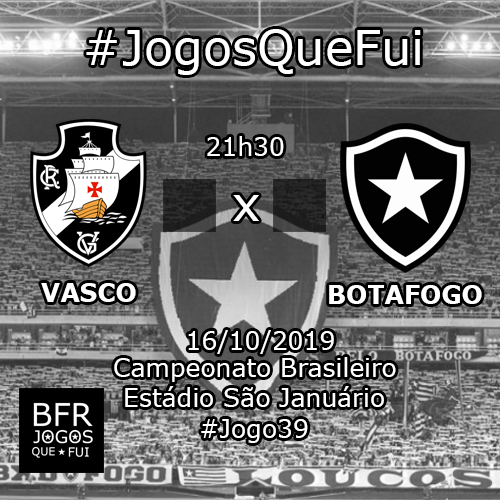
<style>
.page{position:relative;width:500px;height:500px}
.page>*{position:absolute;margin:0}
.t1{font:48px "Verdana";color:#ffffff}
.t2{font:25px "Verdana";color:#ffffff}
.t3{font:25px "Verdana-Bold";color:#ffffff}
</style>
<div class="page">
<p class="t1" style="left:86px;top:29px;width:335px;height:46px">#JogosQueFui</p>
<p class="t2" style="left:207px;top:136px;width:77px;height:20px">21h30</p>
<p class="t1" style="left:233px;top:195px;width:26px;height:26px">x</p>
<p class="t3" style="left:41px;top:283px;width:95px;height:19px">VASCO</p>
<p class="t3" style="left:329px;top:285px;width:153px;height:19px">BOTAFOGO</p>
<p class="t2" style="left:188px;top:330px;width:146px;height:24px">16/10/2019</p>
<p class="t2" style="left:114px;top:357px;width:282px;height:25px">Campeonato Brasileiro</p>
<p class="t2" style="left:125px;top:386px;width:259px;height:21px">Estádio São Januário</p>
<p class="t2" style="left:201px;top:419px;width:107px;height:24px">#Jogo39</p>
</div>
